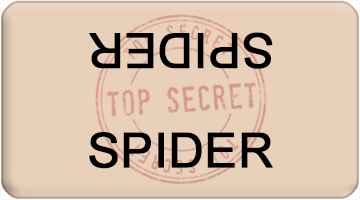
<style>
.page{position:relative;width:360px;height:200px;background:#e8d0bb}
.page>*{position:absolute;margin:0}
.t1{font:48px "ArialMT";color:#000000;font-weight:bold}
</style>
<div class="page">
<p class="t1" style="left:89px;top:32px;width:184px;height:37px;rotate:180deg">SPIDER</p>
<p class="t1" style="left:89px;top:132px;width:184px;height:37px">SPIDER</p>
</div>
